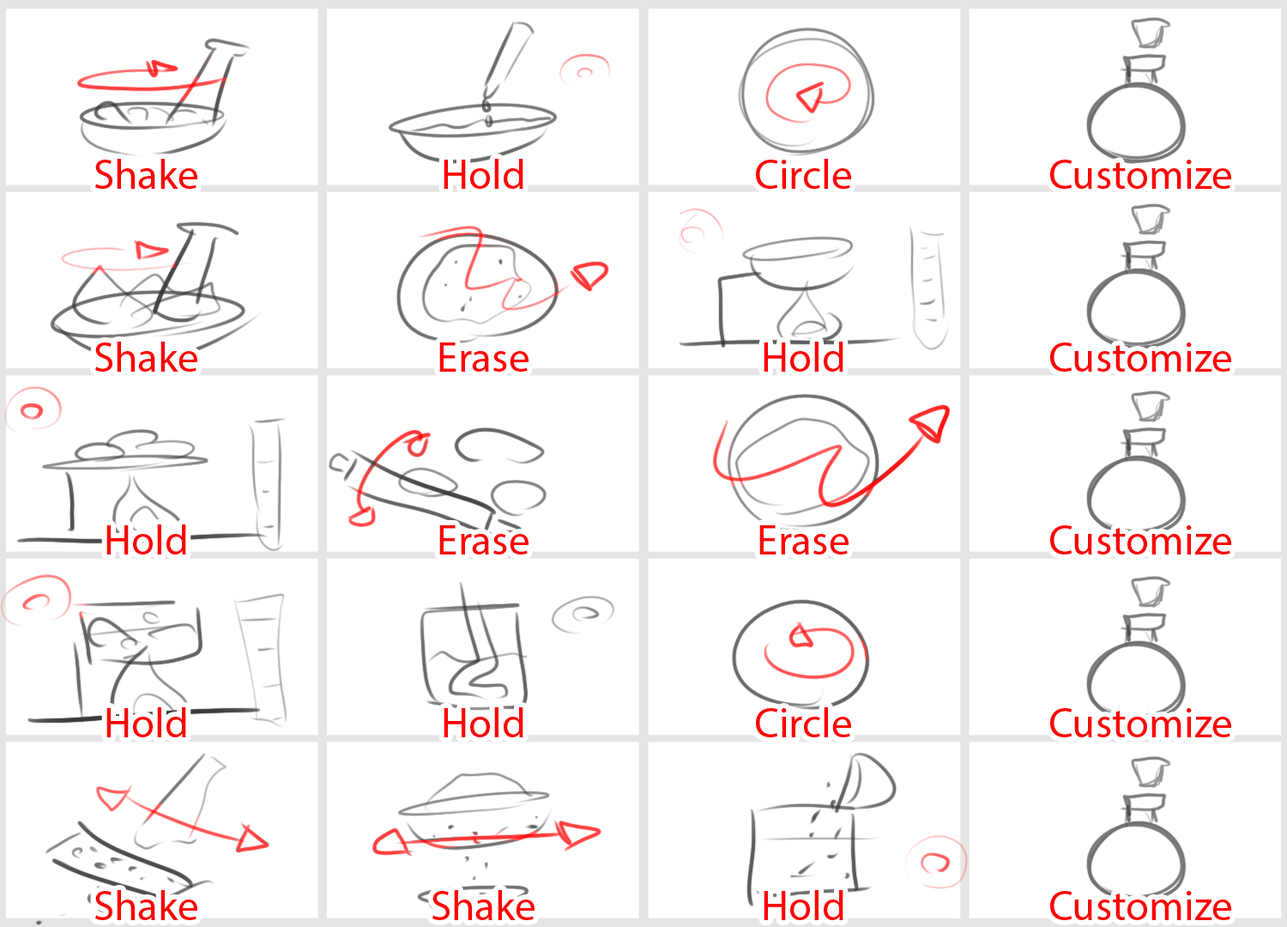
<style>
.page{position:relative;width:1287px;height:927px;background:#ffffff}
.page>*{position:absolute;margin:0}
.t1{font:42.2px "MyriadPro-Regular";color:#ff0000}
</style>
<div class="page">
<p class="t1" style="left:95px;top:159px;width:102px;height:30px">Shake</p>
<p class="t1" style="left:444px;top:159px;width:79px;height:30px">Hold</p>
<p class="t1" style="left:756px;top:159px;width:95px;height:30px">Circle</p>
<p class="t1" style="left:1050px;top:160px;width:181px;height:29px">Customize</p>
<p class="t1" style="left:95px;top:341px;width:102px;height:30px">Shake</p>
<p class="t1" style="left:764px;top:341px;width:79px;height:30px">Hold</p>
<p class="t1" style="left:439px;top:342px;width:89px;height:29px">Erase</p>
<p class="t1" style="left:1050px;top:342px;width:181px;height:29px">Customize</p>
<p class="t1" style="left:106px;top:524px;width:80px;height:30px">Hold</p>
<p class="t1" style="left:439px;top:525px;width:89px;height:29px">Erase</p>
<p class="t1" style="left:759px;top:525px;width:90px;height:29px">Erase</p>
<p class="t1" style="left:1050px;top:525px;width:181px;height:29px">Customize</p>
<p class="t1" style="left:106px;top:707px;width:80px;height:30px">Hold</p>
<p class="t1" style="left:444px;top:707px;width:79px;height:30px">Hold</p>
<p class="t1" style="left:756px;top:707px;width:95px;height:30px">Circle</p>
<p class="t1" style="left:1050px;top:708px;width:181px;height:29px">Customize</p>
<p class="t1" style="left:95px;top:890px;width:102px;height:30px">Shake</p>
<p class="t1" style="left:432px;top:890px;width:102px;height:30px">Shake</p>
<p class="t1" style="left:764px;top:890px;width:79px;height:30px">Hold</p>
<p class="t1" style="left:1050px;top:891px;width:181px;height:29px">Customize</p>
</div>
